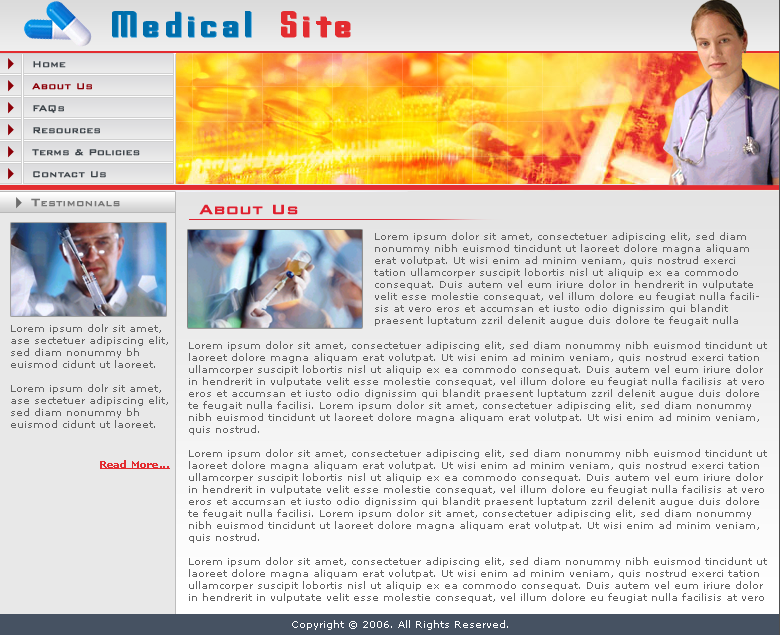
<style>
.page{position:relative;width:780px;height:635px}
.page>*{position:absolute;margin:0}
.t1{font:31.2px "GothamNightsNormal";color:#006daa;font-weight:bold;scale:1.67 1}
.t2{font:31.2px "GothamNightsNormal";color:#e32c30;font-weight:bold;scale:1.67 1}
.t3{font:31.2px "GothamNightsNormal";font-weight:bold;scale:1.67 1}
.t4{font:11px/22px "BankGothicBT-Medium";color:#3e454b;font-weight:bold}
.t5{font:11px/22px "BankGothicBT-Medium";color:#8c0008;font-weight:bold}
.t6{font:14px "BankGothicBT-Medium";color:#777777;font-variant:small-caps;font-weight:bold}
.t7{font:18px "BankGothicBT-Medium";color:#df1f2e;font-weight:bold}
.t8{font:10px "Verdana";color:#626262}
.t9{font:10px "Verdana";color:#ffffff}
</style>
<div class="page">
<p class="t1" style="left:112px;top:11px;width:238px;height:26px">Medical <span class="t2">Site</span></p>
<p class="t3" style="left:113px;top:12px;width:238px;height:26px">Medical Site</p>
<p class="t4" style="left:32px;top:61px;width:108px;height:117px">Home<br><span class="t5">About Us<br></span>FAQs<br>Resources<br>Terms &amp; Policies<br>Contact Us</p>
<p class="t6" style="left:31px;top:198px;width:89px;height:9px">Testimonials</p>
<p class="t7" style="left:199px;top:204px;width:99px;height:11px">About Us</p>
<p class="t8" style="left:374px;top:232px;width:385px;height:94px">Lorem ipsum dolor sit amet, consectetuer adipiscing elit, sed diam nonummy nibh euismod tincidunt ut laoreet dolore magna aliquam erat volutpat. Ut wisi enim ad minim veniam, quis nostrud exerci tation ullamcorper suscipit lobortis nisl ut aliquip ex ea commodo consequat. Duis autem vel eum iriure dolor in hendrerit in vulputate velit esse molestie consequat, vel illum dolore eu feugiat nulla facilisis at vero eros et accumsan et iusto odio dignissim qui blandit praesent luptatum zzril delenit augue duis dolore te feugait nulla facilisi. Lorem ipsum dolor.</p>
<p class="t8" style="left:11px;top:324px;width:157px;height:104px">Lorem ipsum dolr sit amet, ase sectetuer adipiscing elit, sed diam nonummy bh euismod cidunt ut laoreet.<br><br>Lorem ipsum dolr sit amet, ase sectetuer adipiscing elit, sed diam nonummy bh euismod cidunt ut laoreet.</p>
<p class="t8" style="left:188px;top:341px;width:579px;height:262px">Lorem ipsum dolor sit amet, consectetuer adipiscing elit, sed diam nonummy nibh euismod tincidunt ut laoreet dolore magna aliquam erat volutpat. Ut wisi enim ad minim veniam, quis nostrud exerci tation ullamcorper suscipit lobortis nisl ut aliquip ex ea commodo consequat. Duis autem vel eum iriure dolor in hendrerit in vulputate velit esse molestie consequat, vel illum dolore eu feugiat nulla facilisis at vero eros et accumsan et iusto odio dignissim qui blandit praesent luptatum zzril delenit augue duis dolore te feugait nulla facilisi. Lorem ipsum dolor sit amet, consectetuer adipiscing elit, sed diam nonummy nibh euismod tincidunt ut laoreet dolore magna aliquam erat volutpat. Ut wisi enim ad minim veniam, quis nostrud.<br><br>Lorem ipsum dolor sit amet, consectetuer adipiscing elit, sed diam nonummy nibh euismod tincidunt ut laoreet dolore magna aliquam erat volutpat. Ut wisi enim ad minim veniam, quis nostrud exerci tation ullamcorper suscipit lobortis nisl ut aliquip ex ea commodo consequat. Duis autem vel eum iriure dolor in hendrerit in vulputate velit esse molestie consequat, vel illum dolore eu feugiat nulla facilisis at vero eros et accumsan et iusto odio dignissim qui blandit praesent luptatum zzril delenit augue duis dolore te feugait nulla facilisi. Lorem ipsum dolor sit amet, consectetuer adipiscing elit, sed diam nonummy nibh euismod tincidunt ut laoreet dolore magna aliquam erat volutpat. Ut wisi enim ad minim veniam, quis nostrud.<br><br>Lorem ipsum dolor sit amet, consectetuer adipiscing elit, sed diam nonummy nibh euismod tincidunt ut laoreet dolore magna aliquam erat volutpat. Ut wisi enim ad minim veniam, quis nostrud exerci tation ullamcorper suscipit lobortis nisl ut aliquip ex ea commodo consequat. Duis autem vel eum iriure dolor in hendrerit in vulputate velit esse molestie consequat, vel illum dolore eu feugiat nulla facilisis at vero eros.</p>
<p class="t9" style="left:292px;top:620px;width:216px;height:10px">Copyright © 2006. All Rights Reserved.</p>
</div>
